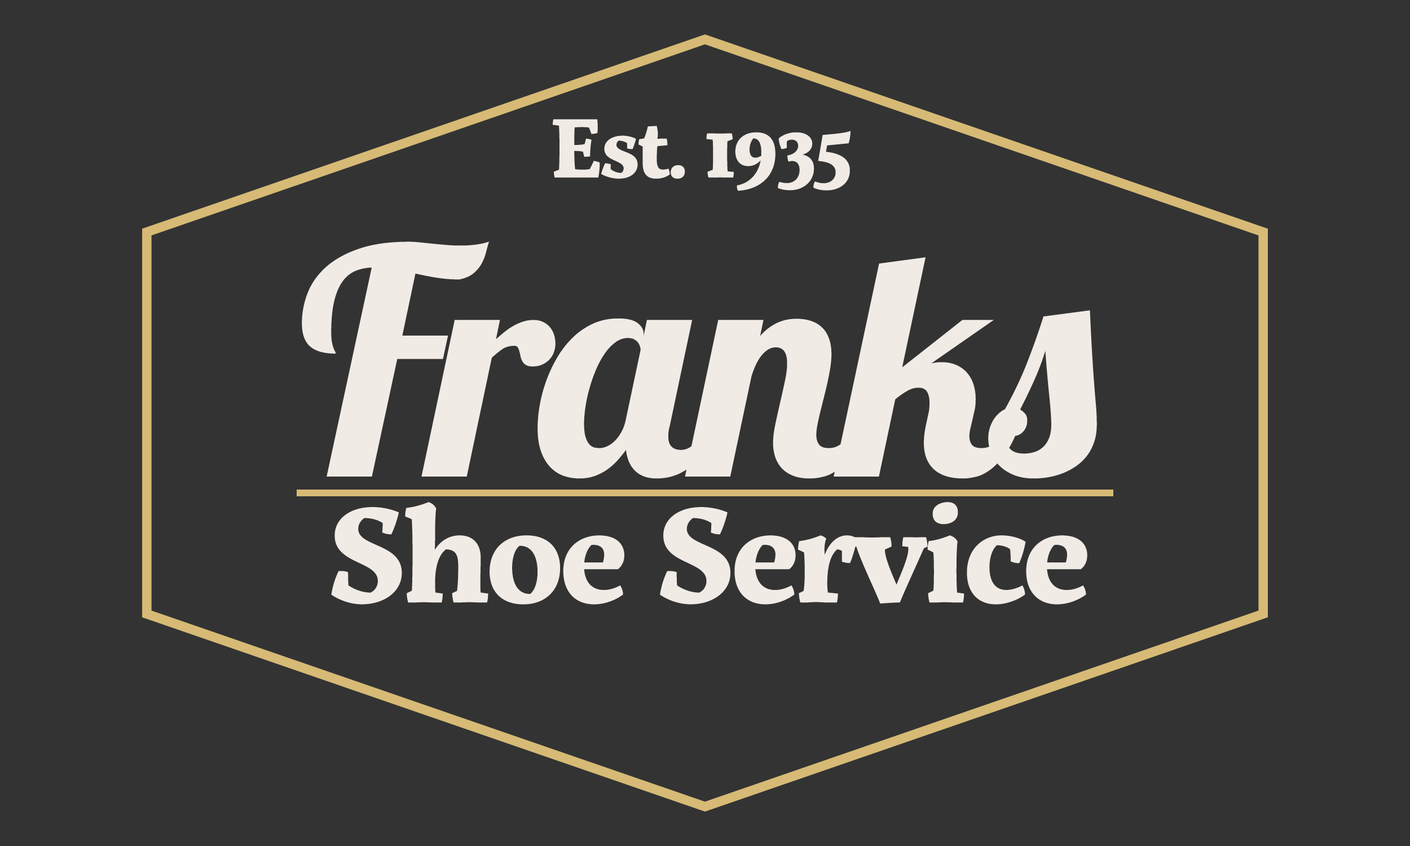
<style>
.page{position:relative;width:1410px;height:846px;background:#333333}
.page>*{position:absolute;margin:0}
.t1{font:83.2px "ServusSlab-Bold";letter-spacing:-0.03em;color:#f1ebe6}
.t2{font:313px "Lobster-Regular";letter-spacing:-0.03em;color:#f1ebe6}
.t3{font:133.5px "ServusSlab-Bold";letter-spacing:-0.03em;color:#f1ebe6}
</style>
<div class="page">
<p class="t1" style="left:553px;top:119px;width:297px;height:72px">Est. 1935</p>
<p class="t2" style="left:302px;top:241px;width:795px;height:238px">Franks</p>
<p class="t3" style="left:331px;top:502px;width:756px;height:102px">Shoe Service</p>
</div>
